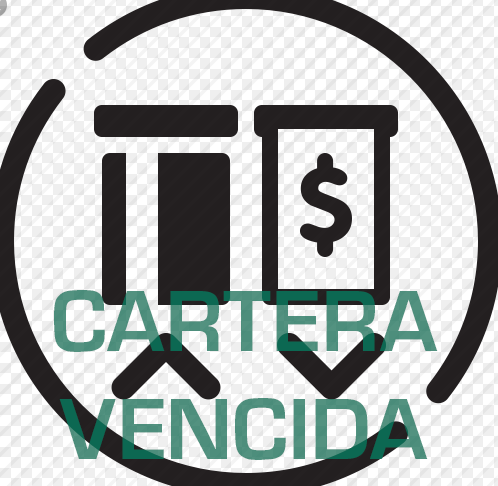
<style>
.page{position:relative;width:498px;height:486px;background:#ffffff}
.page>*{position:absolute;margin:0}
.t1{font:90px "Eurostile-Bol";color:#4d8e7c}
</style>
<div class="page">
<p class="t1" style="left:54px;top:290px;width:384px;height:170px;text-align:center">CARTERA<br>VENCIDA</p>
</div>
